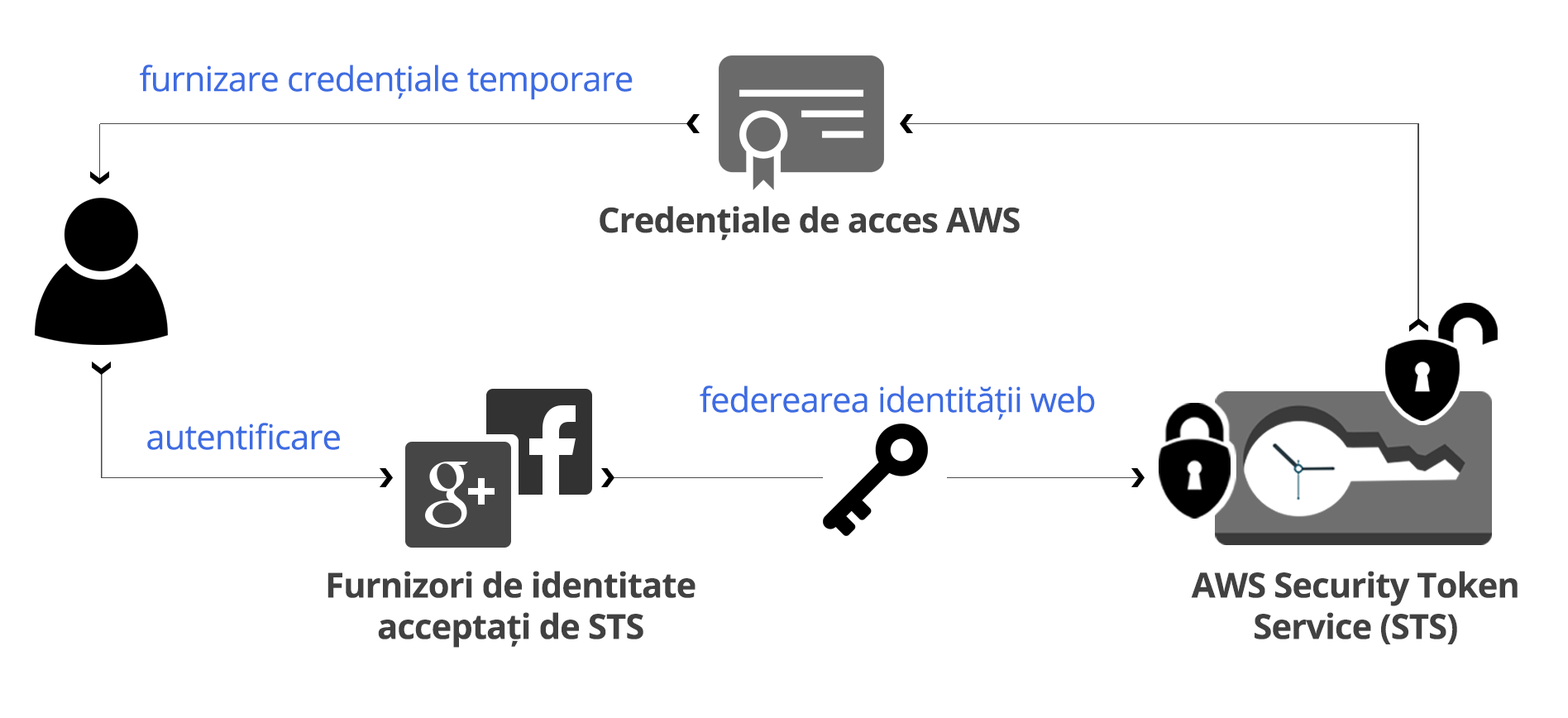
<style>
.page{position:relative;width:1568px;height:718px;background:#ffffff}
.page>*{position:absolute;margin:0}
.t1{font:34.5px "OpenSans";letter-spacing:-0.02em;color:#3d6ce2}
.t2{font:34.5px "OpenSans-Bold";letter-spacing:-0.02em;color:#414141}
.t3{font:34.5px/41.4px "OpenSans-Bold";letter-spacing:-0.02em;color:#414141}
</style>
<div class="page">
<p class="t1" style="left:140px;top:65px;width:493px;height:35px">furnizare credențiale temporare</p>
<p class="t2" style="left:600px;top:206px;width:420px;height:35px">Credențiale de acces AWS</p>
<p class="t1" style="left:700px;top:385px;width:395px;height:35px">federearea identității web</p>
<p class="t1" style="left:147px;top:423px;width:193px;height:27px">autentificare</p>
<p class="t3" style="left:327px;top:571px;width:369px;height:77px;text-align:center">Furnizori de identitate <br>acceptați de STS</p>
<p class="t3" style="left:1191px;top:571px;width:327px;height:73px;text-align:center">AWS Security Token Service (STS)</p>
</div>
